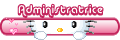
<style>
.page{position:relative;width:120px;height:40px;background:#ffffff}
.page>*{position:absolute;margin:0}
.t1{font:12px "AlbaSuper";color:#c3255c}
</style>
<div class="page">
<p class="t1" style="left:17px;top:3px;width:87px;height:16px">Administratrice</p>
</div>
